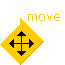
<style>
.page{position:relative;width:65px;height:65px;background:#ffffff}
.page>*{position:absolute;margin:0}
.t1{font:12px "Verdana";color:#ffcc00}
</style>
<div class="page">
<p class="t1" style="left:28px;top:14px;width:32px;height:7px">move</p>
</div>
